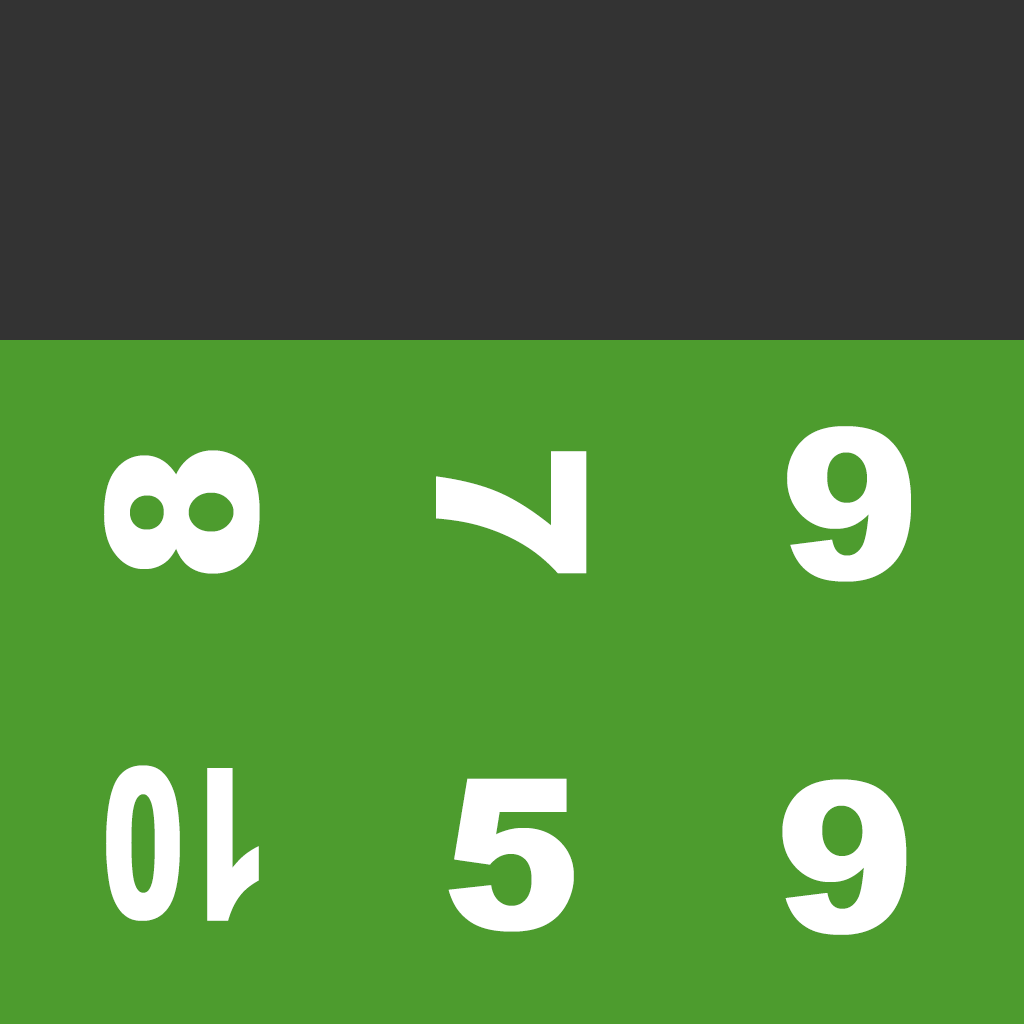
<style>
.page{position:relative;width:1024px;height:1024px;background:#4d9c2e}
.page>*{position:absolute;margin:0}
.t1{font:210px "Arial-Black";color:#ffffff}
.t2{font:210px "Arial-Black";color:#ffffff;scale:0.6 1}
</style>
<div class="page">
<p class="t1" style="left:787px;top:426px;width:124px;height:156px">9</p>
<p class="t1" style="left:104px;top:450px;width:156px;height:124px;rotate:-90deg">8</p>
<p class="t1" style="left:436px;top:451px;width:151px;height:123px;rotate:90deg">7</p>
<p class="t2" style="left:106px;top:765px;width:153px;height:156px;rotate:180deg">10</p>
<p class="t1" style="left:448px;top:778px;width:126px;height:154px">5</p>
<p class="t1" style="left:782px;top:779px;width:125px;height:156px;rotate:180deg">6</p>
</div>
